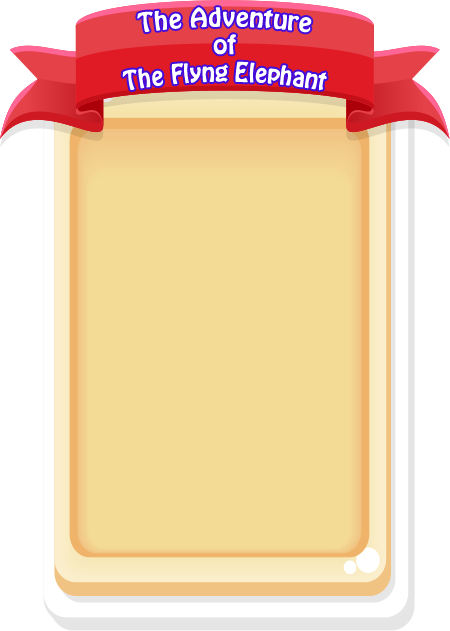
<style>
.page{position:relative;width:450px;height:631px;background:#f3db95}
.page>*{position:absolute;margin:0}
.t1{font:22.9px "HoboStd";color:#ffffff}
</style>
<div class="page">
<p class="t1" style="left:122px;top:7px;width:205px;height:84px;text-align:center">The Adventure<br>of<br>The Flyng Elephant</p>
</div>
